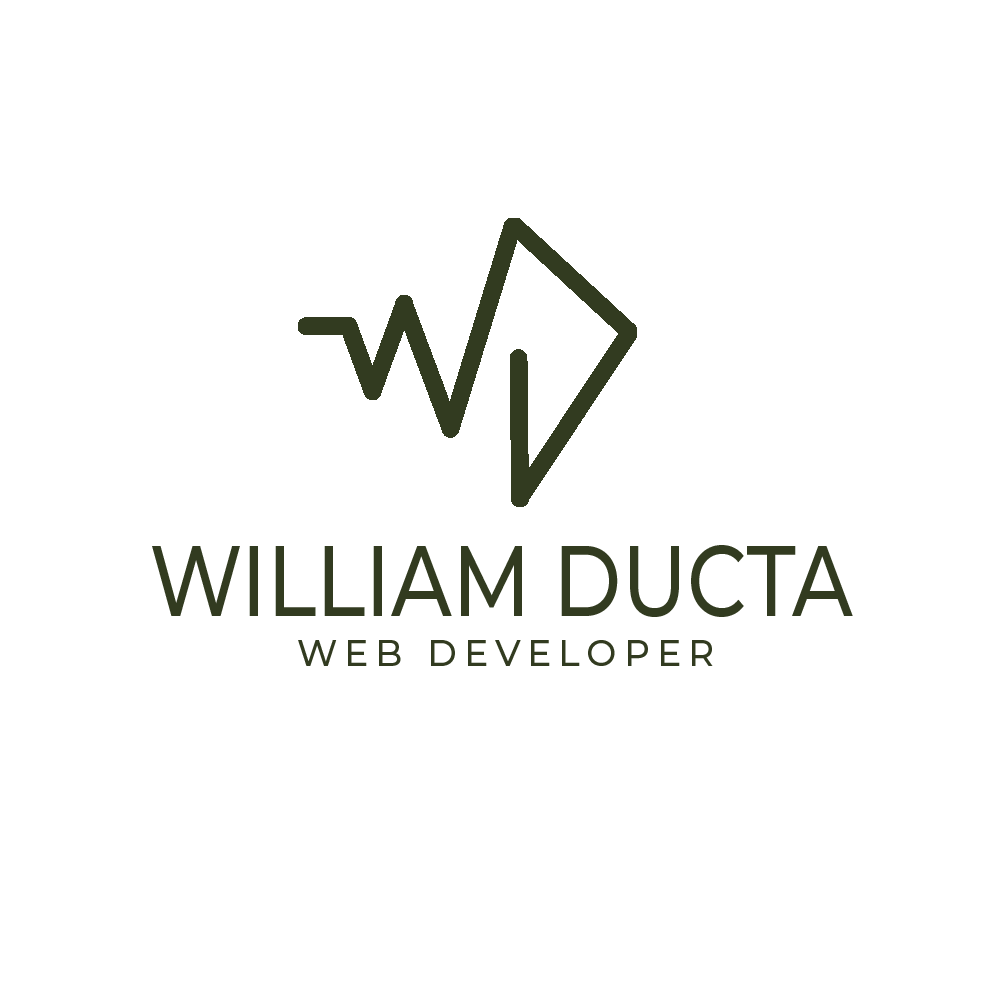
<style>
.page{position:relative;width:1000px;height:1000px;background:#ffffff}
.page>*{position:absolute;margin:0}
.t1{font:100px "Montserrat-Medium";color:#323b20;scale:0.83 1}
.t2{font:36px "Montserrat-Medium";letter-spacing:0.2em;color:#323b20}
</style>
<div class="page">
<p class="t1" style="left:152px;top:545px;width:701px;height:72px">WILLIAM DUCTA</p>
<p class="t2" style="left:298px;top:640px;width:415px;height:26px">WEB DEVELOPER</p>
</div>
